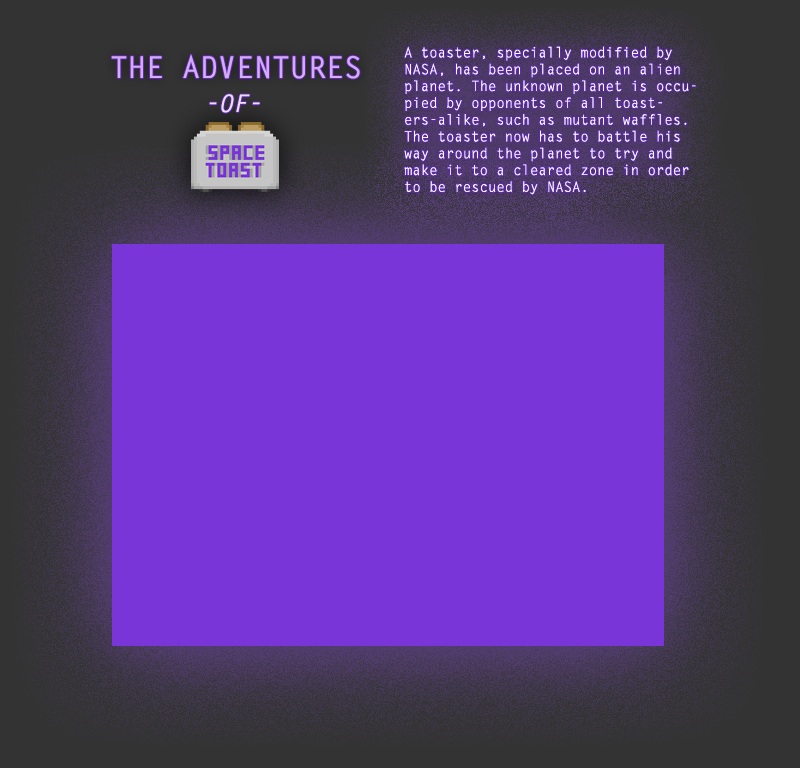
<style>
.page{position:relative;width:800px;height:768px;background:#7a35d8}
.page>*{position:absolute;margin:0}
.t1{font:30px "LetterGothicStd-Bold";color:#d4acf6}
.t2{font:14px "LetterGothicStd";color:#ffffff}
.t3{font:24px "LetterGothicStd-BoldSlanted";color:#eeddfc}
</style>
<div class="page">
<p class="t1" style="left:111px;top:54px;width:249px;height:25px">THE ADVENTURES</p>
<p class="t2" style="left:404px;top:46px;width:292px;height:149px">A toaster, specially modified by NASA, has been placed on an alien planet. The unknown planet is occupied by opponents of all toasters-alike, such as mutant waffles. The toaster now has to battle his way around the planet to try and make it to a cleared zone in order to be rescued by NASA.</p>
<p class="t3" style="left:209px;top:94px;width:51px;height:19px">-OF-</p>
</div>
